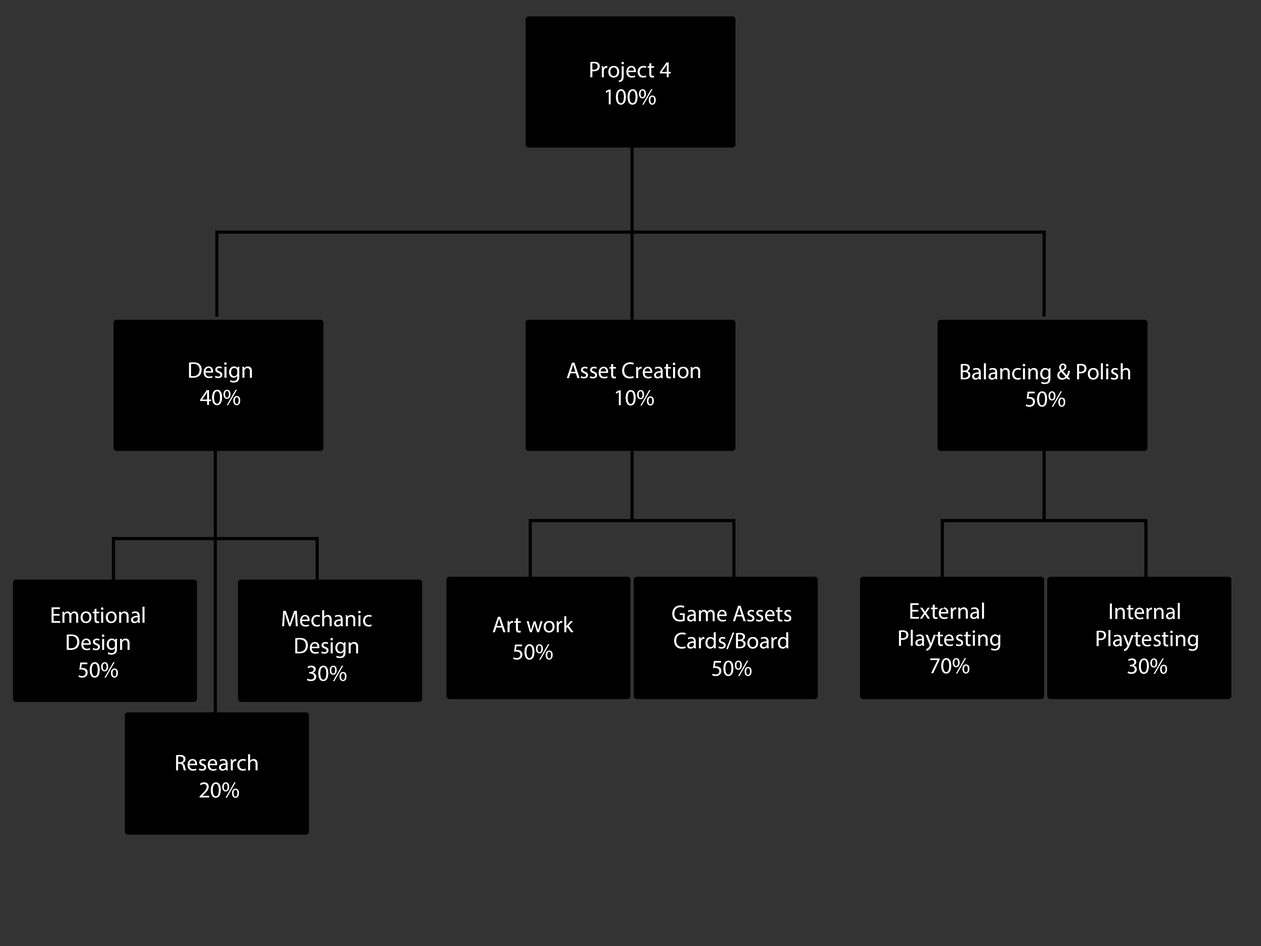
<style>
.page{position:relative;width:1261px;height:946px;background:#333333}
.page>*{position:absolute;margin:0}
.t1{font:22.7px "MyriadPro-Regular";color:#ffffff}
</style>
<div class="page">
<p class="t1" style="left:590px;top:62px;width:81px;height:43px;text-align:center">Project 4<br>100%</p>
<p class="t1" style="left:189px;top:362px;width:63px;height:43px;text-align:center">Design<br>40%</p>
<p class="t1" style="left:567px;top:362px;width:133px;height:43px;text-align:center">Asset Creation<br>10%</p>
<p class="t1" style="left:961px;top:363px;width:169px;height:44px;text-align:center">Balancing &amp; Polish<br>50%</p>
<p class="t1" style="left:672px;top:605px;width:119px;height:71px;text-align:center">Game Assets<br>Cards/Board<br>50%</p>
<p class="t1" style="left:899px;top:602px;width:102px;height:71px;text-align:center">External <br>Playtesting<br>70%</p>
<p class="t1" style="left:1096px;top:603px;width:102px;height:71px;text-align:center">Internal <br>Playtesting<br>30%</p>
<p class="t1" style="left:51px;top:607px;width:94px;height:70px;text-align:center">Emotional<br>Design<br>50%</p>
<p class="t1" style="left:282px;top:610px;width:90px;height:71px;text-align:center">Mechanic<br>Design<br>30%</p>
<p class="t1" style="left:493px;top:616px;width:81px;height:43px;text-align:center">Art work<br>50%</p>
<p class="t1" style="left:176px;top:754px;width:82px;height:44px;text-align:center">Research <br>20%</p>
</div>
